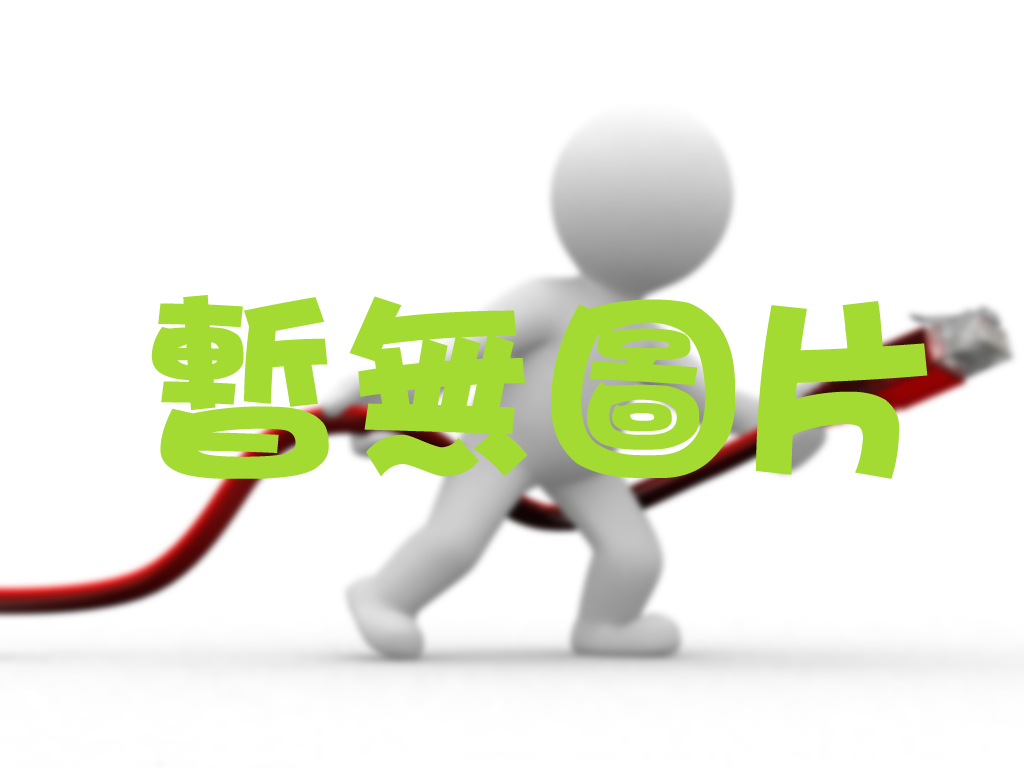
<style>
.page{position:relative;width:1024px;height:768px;background:#ffffff}
.page>*{position:absolute;margin:0}
.t1{font:200px "DFHaiBaoW12-UB-HK-BF";color:#a3db32}
</style>
<div class="page">
<p class="t1" style="left:151px;top:295px;width:777px;height:184px">暫無圖片</p>
</div>
